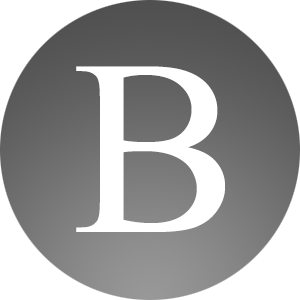
<style>
.page{position:relative;width:300px;height:300px;background:#ffffff}
.page>*{position:absolute;margin:0}
.t1{font:249.8px "TimesNewRomanPSMT";color:#ffffff}
</style>
<div class="page">
<p class="t1" style="left:76px;top:66px;width:149px;height:166px">B</p>
</div>
